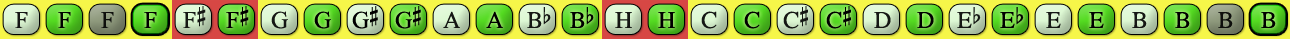
<style>
.page{position:relative;width:1290px;height:39px}
.page>*{position:absolute;margin:0}
.t1{font:24px "OpusChords";color:#000000}
.t2{font:24px "OpusChords";letter-spacing:-0.025em;color:#000000}
</style>
<div class="page">
<p class="t1" style="left:183px;top:6px;width:23px;height:22px;opacity:0.9">F#</p>
<p class="t1" style="left:226px;top:6px;width:23px;height:22px">F#</p>
<p class="t2" style="left:352px;top:6px;width:26px;height:23px">G#</p>
<p class="t2" style="left:395px;top:6px;width:26px;height:23px">G#</p>
<p class="t1" style="left:783px;top:6px;width:25px;height:23px;opacity:0.9">C#</p>
<p class="t1" style="left:826px;top:6px;width:25px;height:23px">C#</p>
<p class="t1" style="left:15px;top:12px;width:13px;height:16px;opacity:0.9">F</p>
<p class="t1" style="left:58px;top:12px;width:13px;height:16px">F</p>
<p class="t1" style="left:101px;top:12px;width:13px;height:16px;opacity:0.9">F</p>
<p class="t1" style="left:144px;top:12px;width:13px;height:16px">F</p>
<p class="t1" style="left:271px;top:11px;width:17px;height:18px;opacity:0.9">G</p>
<p class="t1" style="left:314px;top:11px;width:17px;height:18px">G</p>
<p class="t1" style="left:443px;top:11px;width:17px;height:17px;opacity:0.9">A</p>
<p class="t1" style="left:486px;top:11px;width:17px;height:17px">A</p>
<p class="t1" style="left:527px;top:7px;width:24px;height:21px;opacity:0.9">Bb</p>
<p class="t1" style="left:570px;top:7px;width:24px;height:21px">Bb</p>
<p class="t1" style="left:615px;top:12px;width:17px;height:16px;opacity:0.9">H</p>
<p class="t1" style="left:658px;top:12px;width:17px;height:16px">H</p>
<p class="t1" style="left:701px;top:11px;width:16px;height:18px;opacity:0.9">C</p>
<p class="t1" style="left:744px;top:11px;width:16px;height:18px">C</p>
<p class="t1" style="left:874px;top:12px;width:17px;height:16px;opacity:0.9">D</p>
<p class="t1" style="left:917px;top:12px;width:17px;height:16px">D</p>
<p class="t1" style="left:957px;top:7px;width:24px;height:21px;opacity:0.9">Eb</p>
<p class="t1" style="left:1000px;top:7px;width:24px;height:21px">Eb</p>
<p class="t1" style="left:1046px;top:12px;width:15px;height:16px;opacity:0.9">E</p>
<p class="t1" style="left:1089px;top:12px;width:15px;height:16px">E</p>
<p class="t1" style="left:1132px;top:12px;width:15px;height:16px;opacity:0.9">B</p>
<p class="t1" style="left:1175px;top:12px;width:15px;height:16px">B</p>
<p class="t1" style="left:1218px;top:12px;width:15px;height:16px;opacity:0.9">B</p>
<p class="t1" style="left:1261px;top:12px;width:15px;height:16px">B</p>
</div>
